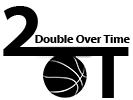
<style>
.page{position:relative;width:133px;height:100px;background:#ffffff}
.page>*{position:absolute;margin:0}
.t1{font:75px "MyriadWebPro-Bold";color:#000000}
.t2{font:11.5px "MyriadWebPro-Bold";color:#000000}
</style>
<div class="page">
<p class="t1" style="left:3px;top:6px;width:36px;height:50px">2</p>
<p class="t2" style="left:35px;top:35px;width:95px;height:8px">Double Over Time</p>
<p class="t1" style="left:88px;top:47px;width:41px;height:51px">T</p>
</div>
